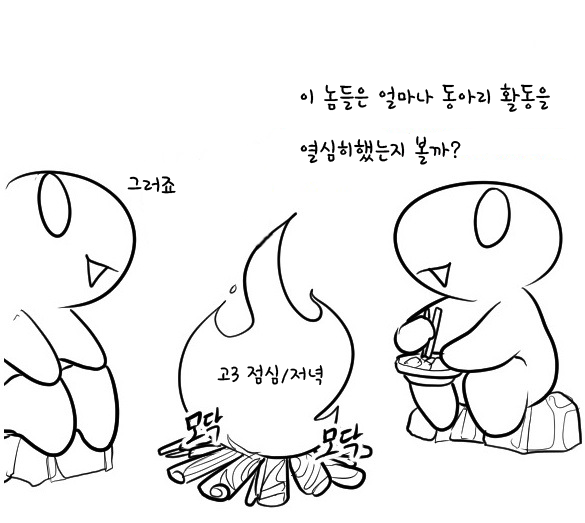
<style>
.page{position:relative;width:585px;height:523px;background:#ffffff}
.page>*{position:absolute;margin:0}
.t1{font:30px "HoonWcatR";color:#000000}
.t2{font:27px "HoonWcatR";color:#000000}
</style>
<div class="page">
<p class="t1" style="left:300px;top:83px;width:250px;height:82px">이 놈들은 얼마나 동아리 활동을 열심히했는지 볼까?</p>
<p class="t1" style="left:127px;top:176px;width:49px;height:18px">그러죠</p>
<p class="t2" style="left:217px;top:364px;width:106px;height:21px">고3 점심/저녁</p>
</div>
